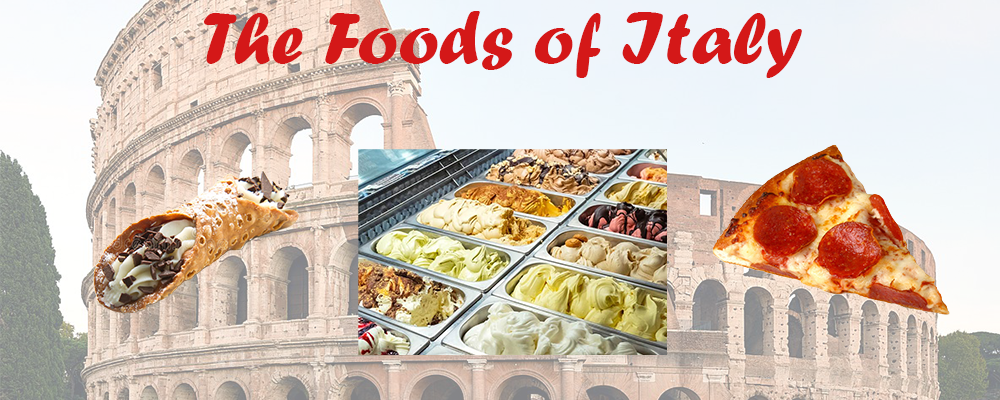
<style>
.page{position:relative;width:1000px;height:400px}
.page>*{position:absolute;margin:0}
.t1{font:75px "ForteMT";color:#d41818}
</style>
<div class="page">
<p class="t1" style="left:204px;top:11px;width:598px;height:67px">The Foods of Italy</p>
</div>
